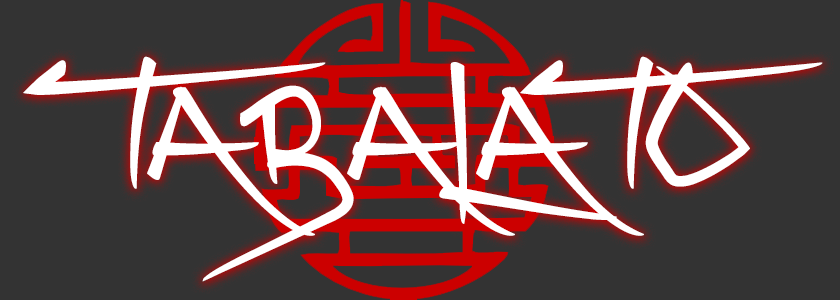
<style>
.page{position:relative;width:840px;height:300px;background:#333333}
.page>*{position:absolute;margin:0}
.t1{font:136px "ZenzaiItachi";color:#ffffff;text-transform:uppercase}
</style>
<div class="page">
<p class="t1" style="left:23px;top:56px;width:800px;height:226px">TABALATO</p>
</div>
